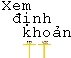
<style>
.page{position:relative;width:71px;height:58px;background:#ffffff}
.page>*{position:absolute;margin:0}
.t1{font:12px/13.3px "CourierNewPSMT";color:#000000}
</style>
<div class="page">
<p class="t1" style="left:2px;top:1px;width:69px;height:36px">Xem<br> định<br>  khoản</p>
</div>
